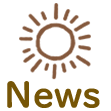
<style>
.page{position:relative;width:111px;height:111px;background:#ffffff}
.page>*{position:absolute;margin:0}
.t1{font:35.6px "UDDigiKyokashoNK-B";color:#765506}
</style>
<div class="page">
<p class="t1" style="left:7px;top:81px;width:93px;height:27px">News</p>
</div>
